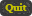
<style>
.page{position:relative;width:32px;height:16px;background:#3b3b3b}
.page>*{position:absolute;margin:0}
.t1{font:10px "Georgia-Bold";letter-spacing:-0.04em;color:#c5c300}
</style>
<div class="page">
<p class="t1" style="left:5px;top:3px;width:22px;height:10px">Quit</p>
</div>
